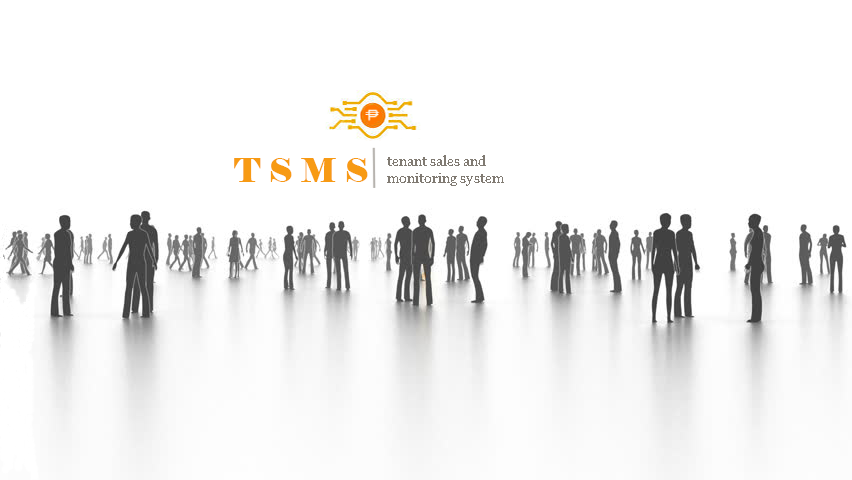
<style>
.page{position:relative;width:852px;height:480px;background:#ffffff}
.page>*{position:absolute;margin:0}
.t1{font:33.3px "Elephant-Regular";color:#f79a14}
.t2{font:13.9px "Georgia";color:#807a72}
</style>
<div class="page">
<p class="t1" style="left:234px;top:158px;width:134px;height:24px">T S M S</p>
<p class="t2" style="left:387px;top:155px;width:117px;height:31px">tenant sales and<br>monitoring system</p>
</div>
